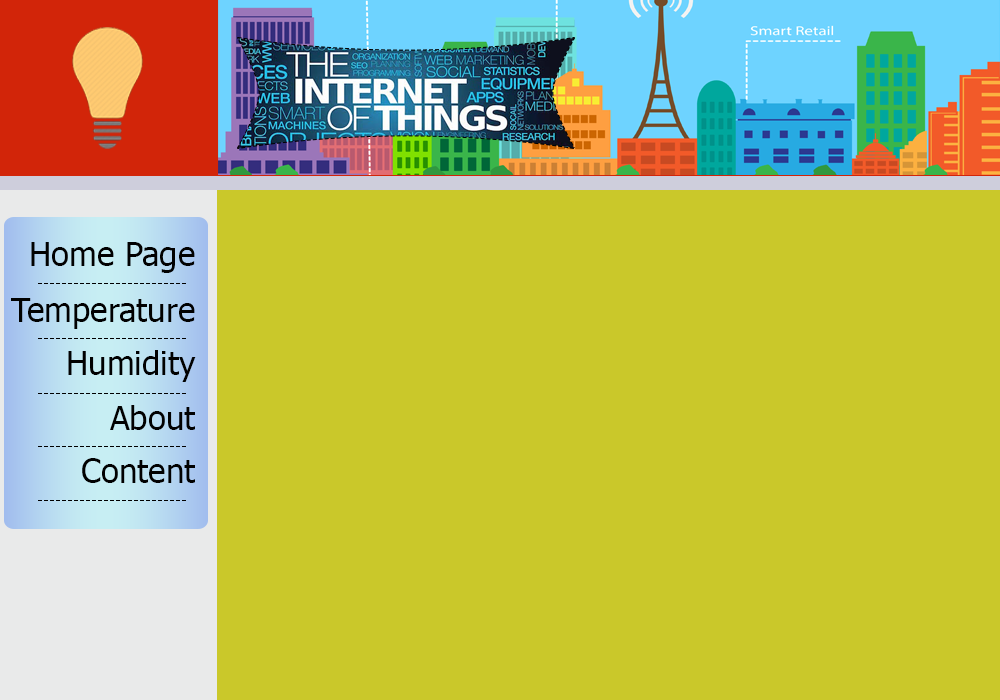
<style>
.page{position:relative;width:1000px;height:700px;background:#cac82a}
.page>*{position:absolute;margin:0}
.t1{font:33px "Tahoma";color:#010101}
</style>
<div class="page">
<p class="t1" style="left:31px;top:242px;width:164px;height:31px">Home Page</p>
<p class="t1" style="left:11px;top:298px;width:184px;height:31px">Temperature</p>
<p class="t1" style="left:68px;top:350px;width:128px;height:32px">Humidity</p>
<p class="t1" style="left:110px;top:405px;width:85px;height:25px">About</p>
<p class="t1" style="left:82px;top:458px;width:113px;height:25px">Content</p>
</div>
